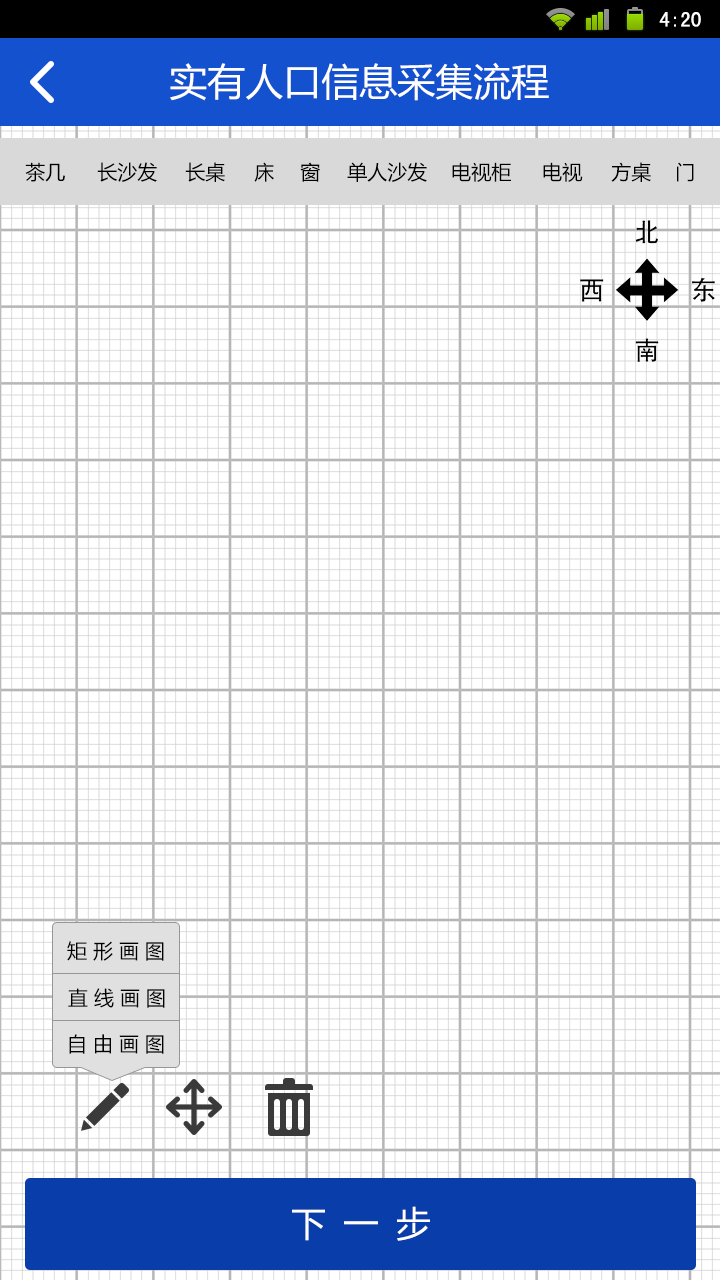
<style>
.page{position:relative;width:720px;height:1280px;background:#ffffff}
.page>*{position:absolute;margin:0}
.t1{font:21px "SimHei";color:#ffffff}
.t2{font:38px "MicrosoftYaHei";color:#ffffff}
.t3{font:20px "MicrosoftYaHei";color:#000000}
.t4{font:20px "MicrosoftYaHei";letter-spacing:0.3em;color:#000000}
.t5{font:35px "MicrosoftYaHei";letter-spacing:0.5em;color:#ffffff}
</style>
<div class="page">
<p class="t1" style="left:659px;top:12px;width:42px;height:15px">4:20</p>
<p class="t2" style="left:170px;top:62px;width:379px;height:39px">实有人口信息采集流程</p>
<p class="t3" style="left:25px;top:162px;width:40px;height:20px">茶几</p>
<p class="t3" style="left:97px;top:162px;width:60px;height:20px">长沙发</p>
<p class="t3" style="left:185px;top:162px;width:40px;height:20px">长桌</p>
<p class="t3" style="left:254px;top:162px;width:20px;height:20px">床</p>
<p class="t3" style="left:300px;top:162px;width:20px;height:20px">窗</p>
<p class="t3" style="left:347px;top:162px;width:80px;height:20px">单人沙发</p>
<p class="t3" style="left:452px;top:162px;width:59px;height:20px">电视柜</p>
<p class="t3" style="left:543px;top:162px;width:40px;height:20px">电视</p>
<p class="t3" style="left:611px;top:162px;width:40px;height:20px">方桌</p>
<p class="t3" style="left:677px;top:162px;width:17px;height:20px">门</p>
<p class="t4" style="left:67px;top:941px;width:97px;height:20px">矩形画图</p>
<p class="t4" style="left:68px;top:988px;width:97px;height:20px">直线画图</p>
<p class="t4" style="left:69px;top:1034px;width:95px;height:20px">自由画图</p>
<p class="t5" style="left:292px;top:1206px;width:138px;height:35px">下一步</p>
</div>
